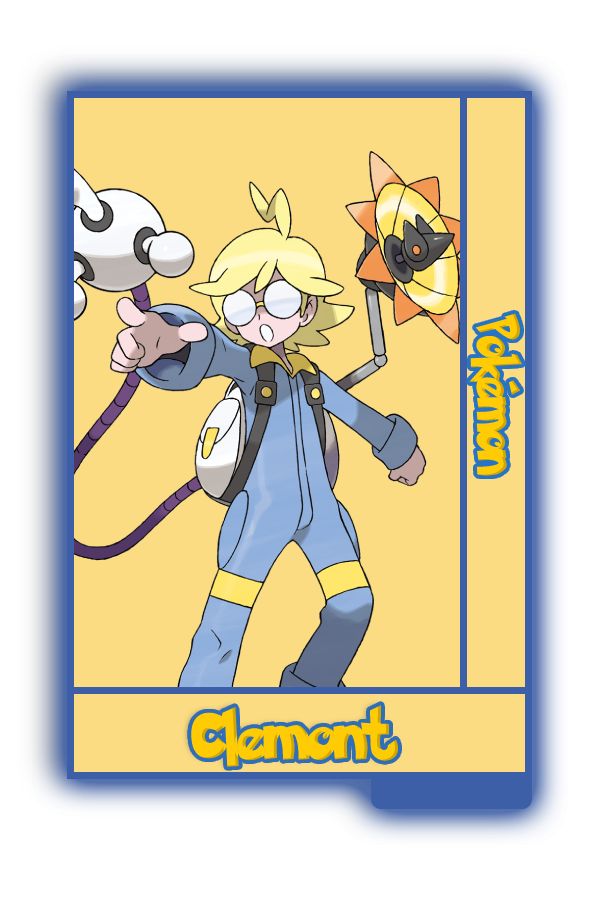
<style>
.page{position:relative;width:600px;height:900px;background:#fbdc83}
.page>*{position:absolute;margin:0}
.t1{font:48.8px "PokemonSolidNormal";color:#ffcb05;scale:0.8 1}
.t2{font:56.6px "PokemonSolidNormal";color:#ffcb05;scale:0.92 1}
</style>
<div class="page">
<p class="t1" style="left:469px;top:313px;width:54px;height:163px;rotate:90deg">Pokémon</p>
<p class="t2" style="left:191px;top:705px;width:208px;height:62px">Clemont</p>
</div>
